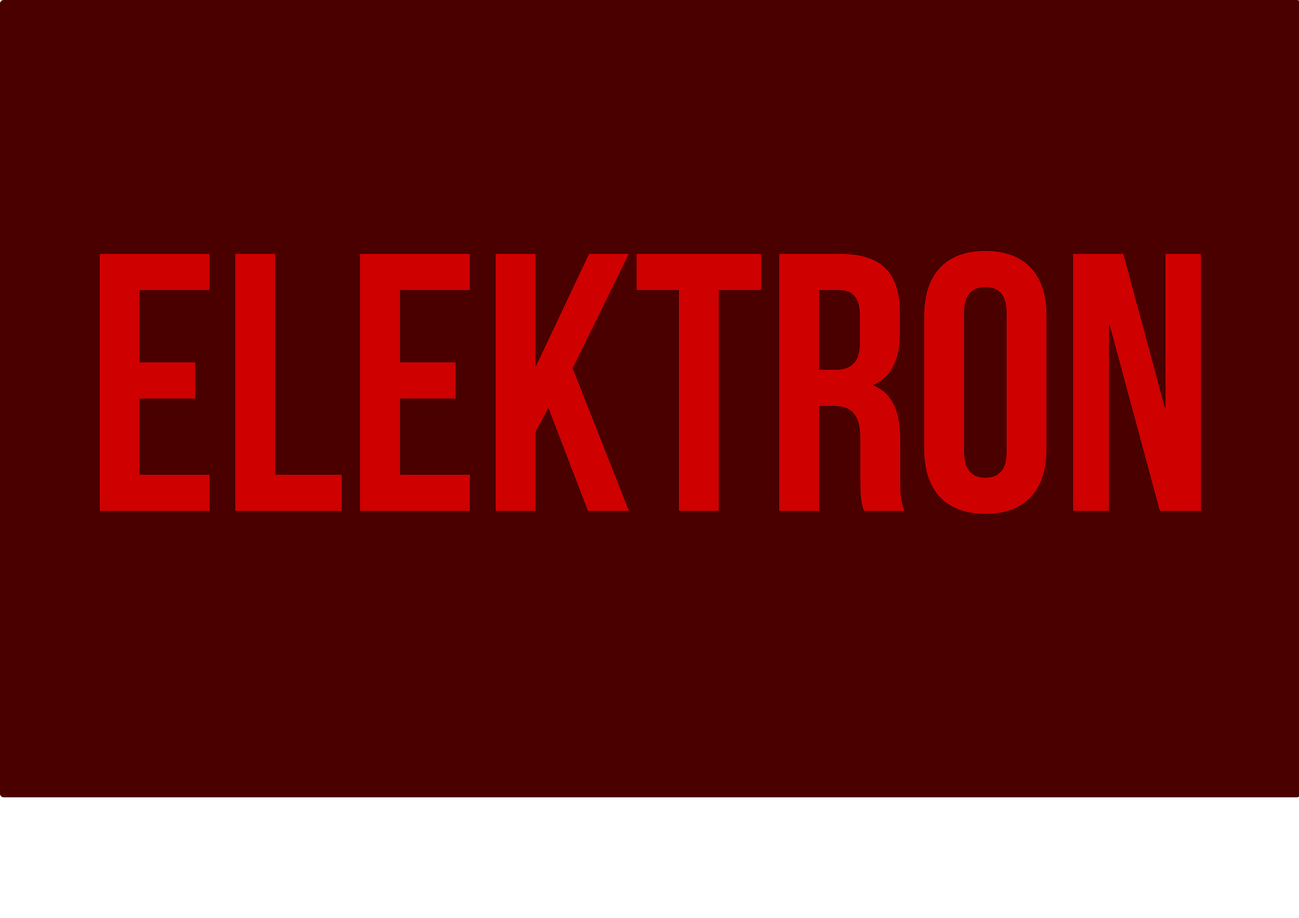
<style>
.page{position:relative;width:1299px;height:918px;background:#4b0000}
.page>*{position:absolute;margin:0}
.t1{font:368.3px "BebasNeueBold";color:#ce0000}
</style>
<div class="page">
<p class="t1" style="left:99px;top:251px;width:1102px;height:263px">elektron</p>
</div>
